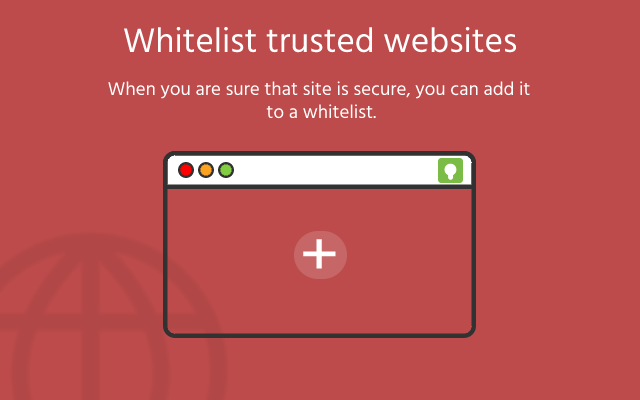
<style>
.page{position:relative;width:640px;height:400px;background:#bd4b4b}
.page>*{position:absolute;margin:0}
.t1{font:35px "Hind-Regular";color:#ffffff}
.t2{font:19px "Hind-Regular";color:#ffffff}
.t3{font:65.2px "Hind-Regular";letter-spacing:0.096em;color:#ffffff;scale:1.12 1}
</style>
<div class="page">
<p class="t1" style="left:123px;top:26px;width:394px;height:27px">Whitelist trusted websites</p>
<p class="t2" style="left:108px;top:81px;width:422px;height:38px;text-align:center">When you are sure that site is secure, you can add it<br> to a whitelist.</p>
<p class="t3" style="left:303px;top:239px;width:33px;height:30px">+</p>
</div>
